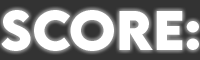
<style>
.page{position:relative;width:200px;height:60px;background:#ffffff}
.page>*{position:absolute;margin:0}
.t1{font:50px "LEMONMILK-Bold";color:#ffffff}
</style>
<div class="page">
<p class="t1" style="left:1px;top:10px;width:198px;height:41px">SCORE:</p>
</div>
